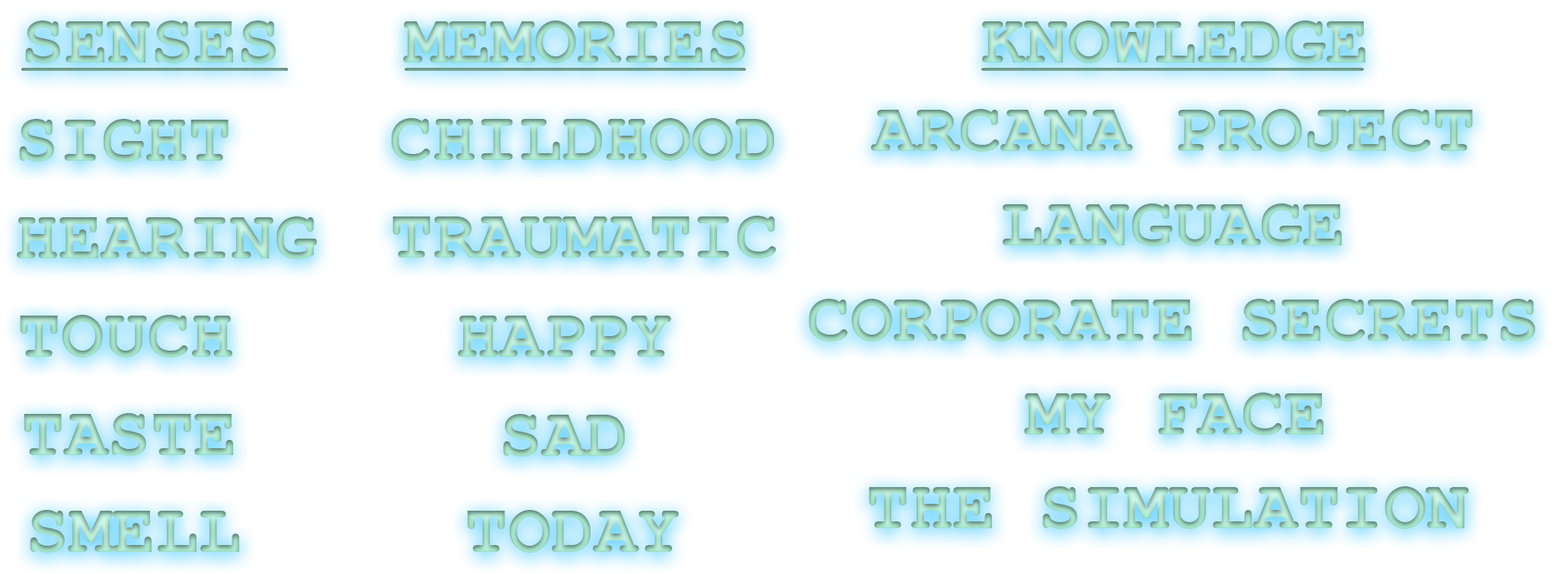
<style>
.page{position:relative;width:1568px;height:574px;background:#ffffff}
.page>*{position:absolute;margin:0}
.t1{font:71.8px "CourierNewPS-BoldMT"}
</style>
<div class="page">
<p class="t1" style="left:25px;top:21px;width:251px;height:42px">SENSES</p>
<p class="t1" style="left:403px;top:21px;width:342px;height:42px">MEMORIES</p>
<p class="t1" style="left:982px;top:21px;width:383px;height:42px">KNOWLEDGE</p>
<p class="t1" style="left:871px;top:109px;width:602px;height:43px">ARCANA PROJECT</p>
<p class="t1" style="left:19px;top:119px;width:210px;height:43px">SIGHT</p>
<p class="t1" style="left:391px;top:118px;width:383px;height:43px">CHILDHOOD</p>
<p class="t1" style="left:1003px;top:203px;width:339px;height:43px">LANGUAGE</p>
<p class="t1" style="left:17px;top:216px;width:300px;height:43px">HEARING</p>
<p class="t1" style="left:392px;top:216px;width:384px;height:42px">TRAUMATIC</p>
<p class="t1" style="left:808px;top:299px;width:727px;height:42px">CORPORATE SECRETS</p>
<p class="t1" style="left:20px;top:315px;width:212px;height:42px">TOUCH</p>
<p class="t1" style="left:458px;top:315px;width:213px;height:42px">HAPPY</p>
<p class="t1" style="left:1024px;top:392px;width:299px;height:43px">MY FACE</p>
<p class="t1" style="left:24px;top:413px;width:209px;height:43px">TASTE</p>
<p class="t1" style="left:503px;top:414px;width:122px;height:42px">SAD</p>
<p class="t1" style="left:869px;top:486px;width:600px;height:43px">THE SIMULATION</p>
<p class="t1" style="left:30px;top:510px;width:209px;height:42px">SMELL</p>
<p class="t1" style="left:467px;top:510px;width:212px;height:42px">TODAY</p>
</div>
